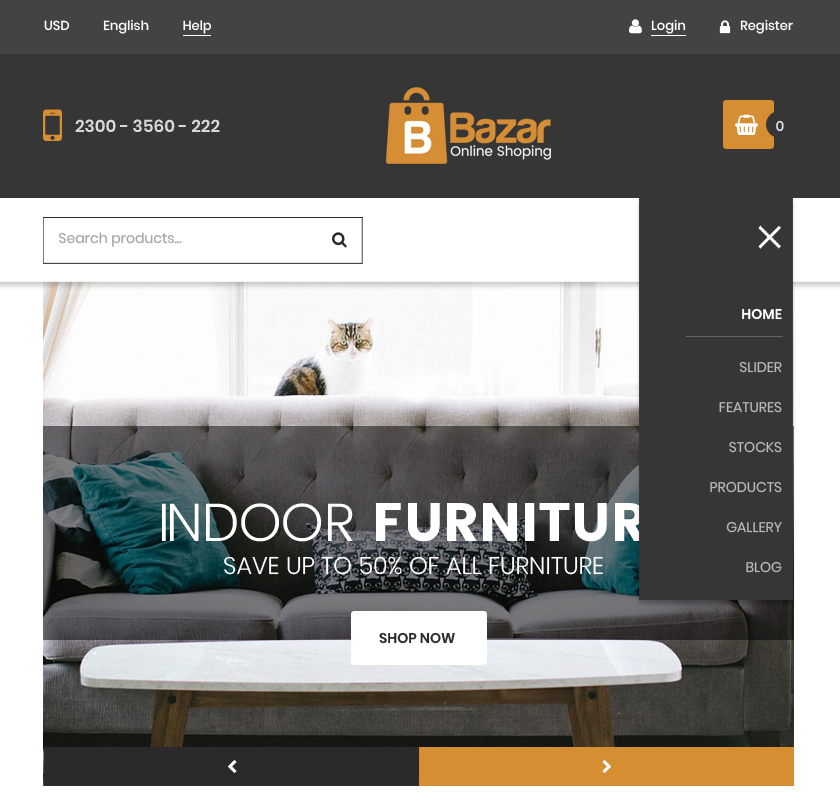
<style>
.page{position:relative;width:840px;height:807px;background:#363636}
.page>*{position:absolute;margin:0}
.t1{font:13px "Poppins-Medium";color:#ffffff}
.t2{font:17px "Poppins-SemiBold";color:#d8d8d8}
.t3{font:14px "Poppins-Medium";color:#e0e3ed}
.t4{font:14px "Poppins-Regular";color:#a4a4a4}
.t5{font:14px/40px "Poppins-Regular";color:#b8b8b8}
.t6{font:14px/38px "Poppins-SemiBold";color:#ffffff}
.t7{font:54px "Poppins";color:#ffffff;text-transform:uppercase}
.t8{font:54px "Poppins-Light";letter-spacing:-0.086em;color:#ffffff;text-transform:uppercase}
.t9{font:54px "Poppins-Light";color:#ffffff;text-transform:uppercase}
.t10{font:24px "Poppins-Light";color:#ffffff;text-transform:uppercase}
.t11{font:14px "Poppins-SemiBold";color:#2a2a2a;text-transform:uppercase}
</style>
<div class="page">
<p class="t1" style="left:44px;top:20px;width:168px;height:14px">USD           English           Help</p>
<p class="t1" style="left:651px;top:19px;width:35px;height:15px">Login</p>
<p class="t1" style="left:740px;top:19px;width:53px;height:15px">Register</p>
<p class="t2" style="left:75px;top:119px;width:145px;height:13px">2300 - 3560 - 222</p>
<p class="t3" style="left:776px;top:120px;width:8px;height:12px">0</p>
<p class="t4" style="left:59px;top:232px;width:123px;height:15px">Search products...</p>
<p class="t5" style="left:710px;top:308px;width:72px;height:265px;text-align:right"><span class="t6">HOME<br><br></span>SLIDER<br>FEATURES<br>STOCKS<br>PRODUCTS<br>GALLERY<br>BLOG</p>
<p class="t7" style="left:162px;top:503px;width:512px;height:39px"><span class="t8">i</span><span class="t9">ndoor</span> furniture</p>
<p class="t10" style="left:224px;top:556px;width:379px;height:19px">save up to 50% of all furniture</p>
<p class="t11" style="left:379px;top:632px;width:76px;height:12px">shop now</p>
</div>
